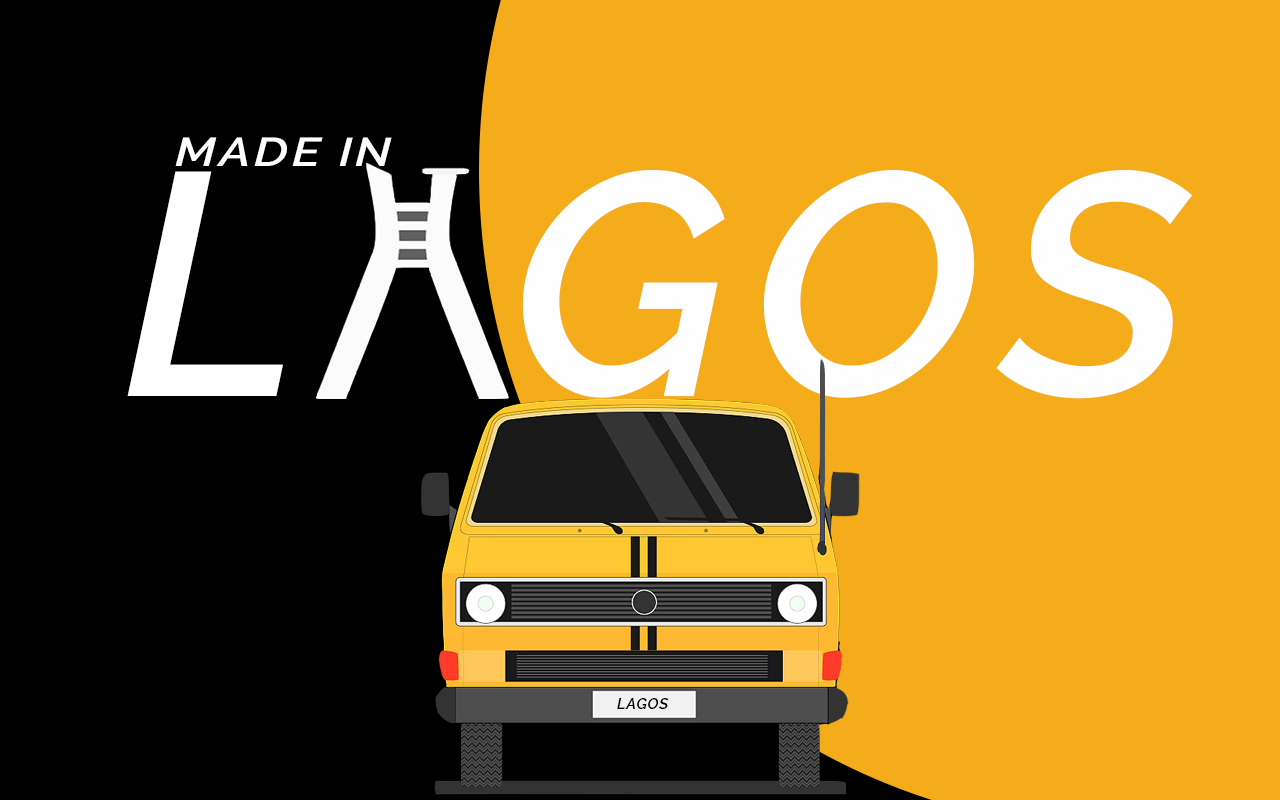
<style>
.page{position:relative;width:1280px;height:800px;background:#f4ac1a}
.page>*{position:absolute;margin:0}
.t1{font:40px "Raleway-SemiBoldItalic";letter-spacing:0.07em;color:#fffeff;text-transform:uppercase;scale:1.22 1}
.t2{font:316.4px "Raleway-SemiBoldItalic";letter-spacing:0.07em;color:#fffeff;text-transform:uppercase}
.t3{font:14.7px "Raleway-SemiBoldItalic";letter-spacing:0.07em;color:#000000;text-transform:uppercase}
</style>
<div class="page">
<p class="t1" style="left:175px;top:137px;width:217px;height:29px">MADE IN</p>
<p class="t2" style="left:127px;top:170px;width:1065px;height:229px">L  GOS</p>
<p class="t3" style="left:617px;top:698px;width:52px;height:11px">LAGOS</p>
</div>
